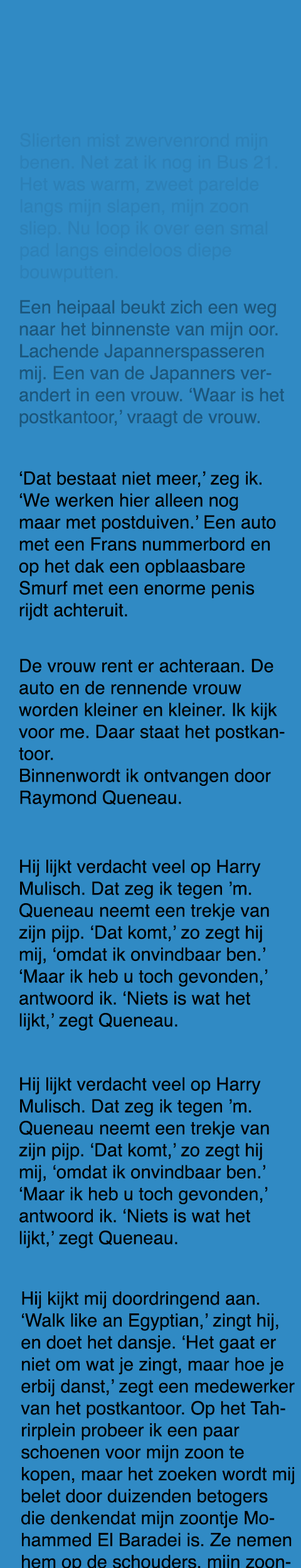
<style>
.page{position:relative;width:301px;height:1568px;background:#308ac4}
.page>*{position:absolute;margin:0}
.t1{font:18.3px "Helvetica";color:#2c80b7}
.t2{font:18.3px "Helvetica";color:#1b567c}
.t3{font:18.3px "Helvetica";color:#000000}
</style>
<div class="page">
<p class="t1" style="left:19px;top:133px;width:258px;height:149px">Slierten mist zwervenrond mijn benen. Net zat ik nog in Bus 21. Het was warm, zweet parelde langs mijn slapen, mijn zoon sliep. Nu loop ik over een smal pad langs eindeloos diepe bouwputten.</p>
<p class="t2" style="left:19px;top:300px;width:265px;height:127px">Een heipaal beukt zich een weg naar het binnenste van mijn oor. Lachende Japannerspasseren mij. Een van de Japanners verandert in een vrouw. ‘Waar is het postkantoor,’ vraagt de vrouw.</p>
<p class="t3" style="left:19px;top:471px;width:257px;height:149px">‘Dat bestaat niet meer,’ zeg ik. ‘We werken hier alleen nog maar met postduiven.’ Een auto met een Frans nummerbord en op het dak een opblaasbare Smurf met een enorme penis rijdt achteruit.</p>
<p class="t3" style="left:19px;top:659px;width:266px;height:149px">De vrouw rent er achteraan. De auto en de rennende vrouw worden kleiner en kleiner. Ik kijk voor me. Daar staat het postkantoor.<br>Binnenwordt ik ontvangen door Raymond Queneau.</p>
<p class="t3" style="left:19px;top:859px;width:250px;height:171px">Hij lijkt verdacht veel op Harry Mulisch. Dat zeg ik tegen ’m. Queneau neemt een trekje van zijn pijp. ‘Dat komt,’ zo zegt hij mij, ‘omdat ik onvindbaar ben.’ ‘Maar ik heb u toch gevonden,’ antwoord ik. ‘Niets is wat het lijkt,’ zegt Queneau.</p>
<p class="t3" style="left:19px;top:1077px;width:250px;height:171px">Hij lijkt verdacht veel op Harry Mulisch. Dat zeg ik tegen ’m. Queneau neemt een trekje van zijn pijp. ‘Dat komt,’ zo zegt hij mij, ‘omdat ik onvindbaar ben.’ ‘Maar ik heb u toch gevonden,’ antwoord ik. ‘Niets is wat het lijkt,’ zegt Queneau.</p>
</div>
